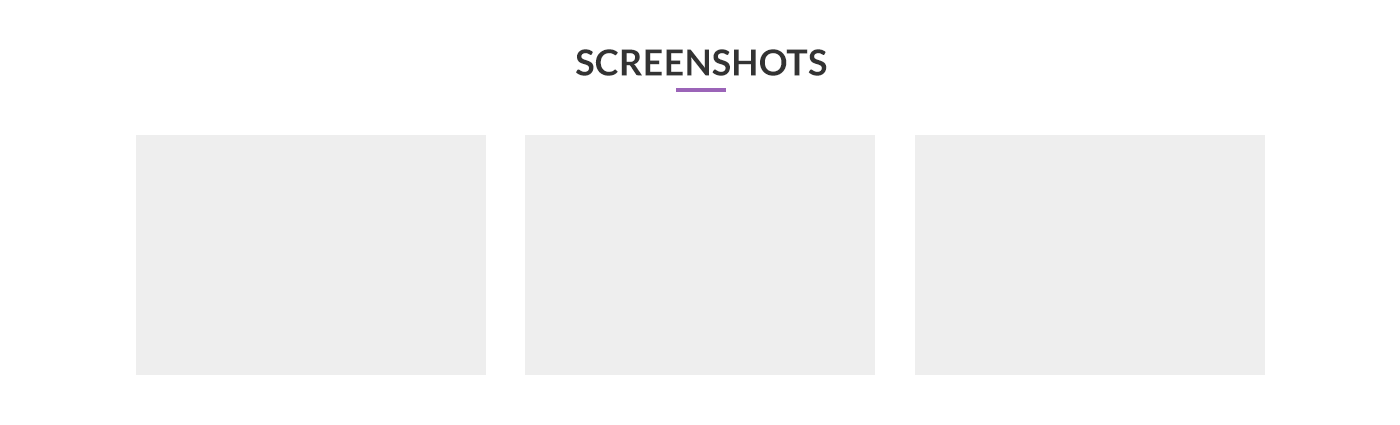
<style>
.page{position:relative;width:1400px;height:425px;background:#ffffff}
.page>*{position:absolute;margin:0}
.t1{font:36px "Lato-Bold";letter-spacing:0.005em;color:#333333}
</style>
<div class="page">
<p class="t1" style="left:576px;top:49px;width:251px;height:27px">SCREENSHOTS</p>
</div>
